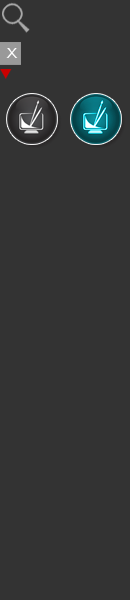
<style>
.page{position:relative;width:130px;height:600px;background:#333333}
.page>*{position:absolute;margin:0}
.t1{font:19.4px "ErgoeRegular";letter-spacing:0.04em;color:#ffffff;scale:1.26 1}
</style>
<div class="page">
<p class="t1" style="left:6px;top:48px;width:12px;height:10px">x</p>
</div>
